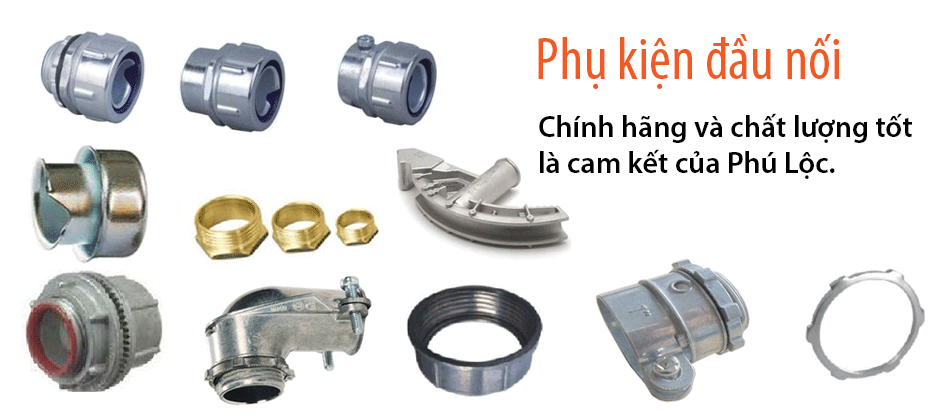
<style>
.page{position:relative;width:940px;height:420px;background:#ffffff}
.page>*{position:absolute;margin:0}
.t1{font:60px "MyriadPro-Cond";color:#f15a23}
.t2{font:30px "MyriadPro-Semibold";color:#000000}
</style>
<div class="page">
<p class="t1" style="left:538px;top:34px;width:301px;height:55px">Phụ kiện đầu nối</p>
<p class="t2" style="left:539px;top:113px;width:373px;height:66px">Chính hãng và chất lượng tốt <br>là cam kết của Phú Lộc.</p>
</div>
